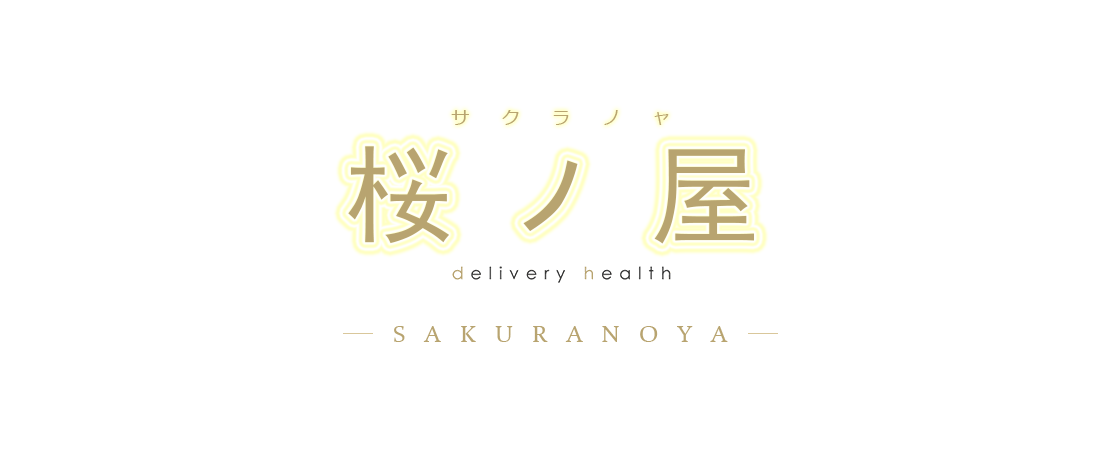
<style>
.page{position:relative;width:1120px;height:450px;background:#ffffff}
.page>*{position:absolute;margin:0}
.t1{font:18px "Meiryo";letter-spacing:1.8em;color:#b8a470}
.t2{font:110px "SimHei";letter-spacing:0.39em;color:#b8a470}
.t3{font:24px "Constantia";letter-spacing:0.8em;color:#b8a470}
</style>
<div class="page">
<p class="t1" style="left:451px;top:110px;width:218px;height:15px">サクラノャ</p>
<p class="t2" style="left:348px;top:146px;width:406px;height:98px">桜ノ屋</p>
<p class="t3" style="left:394px;top:326px;width:334px;height:16px">SAKURANOYA</p>
</div>
